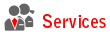
<style>
.page{position:relative;width:110px;height:37px;background:#ffffff}
.page>*{position:absolute;margin:0}
.t1{font:18px "BellGothicStd-Bold";color:#f90404}
</style>
<div class="page">
<p class="t1" style="left:42px;top:14px;width:64px;height:14px">Services</p>
</div>
